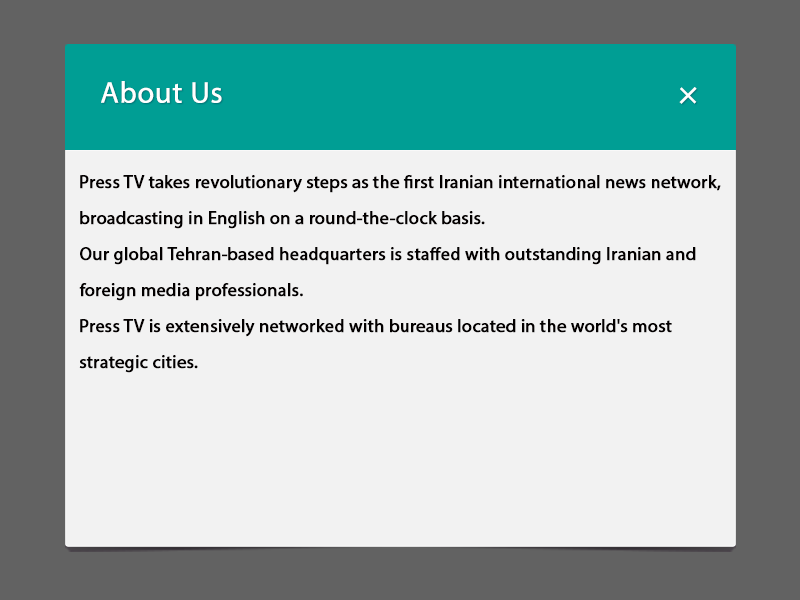
<style>
.page{position:relative;width:800px;height:600px;background:#f2f2f2}
.page>*{position:absolute;margin:0}
.t1{font:30.2px "MyriadPro-Regular";color:#ffffff;font-weight:bold}
.t2{font:40.2px "MyriadPro-Regular";color:#ffffff}
.t3{font:18px/36px "MyriadPro-Regular";color:#030000;font-weight:bold}
</style>
<div class="page">
<p class="t1" style="left:101px;top:81px;width:121px;height:22px">About Us</p>
<p class="t2" style="left:679px;top:87px;width:18px;height:17px;rotate:45deg">+</p>
<p class="t3" style="left:79px;top:175px;width:642px;height:198px">Press TV takes revolutionary steps as the first Iranian international news network, broadcasting in English on a round-the-clock basis.<br>Our global Tehran-based headquarters is staffed with outstanding Iranian and foreign media professionals.<br>Press TV is extensively networked with bureaus located in the world's most strategic cities.</p>
</div>
